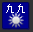
<style>
.page{position:relative;width:33px;height:32px;background:#000090}
.page>*{position:absolute;margin:0}
.t1{font:10.4px "SimSun";color:#ffffff}
</style>
<div class="page">
<p class="t1" style="left:6px;top:4px;width:19px;height:9px">九九</p>
</div>
